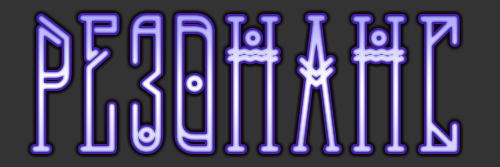
<style>
.page{position:relative;width:500px;height:167px;background:#333333}
.page>*{position:absolute;margin:0}
.t1{font:122.6px "AOTYPEcyr-lat";letter-spacing:0.03em;font-weight:bold}
</style>
<div class="page">
<p class="t1" style="left:32px;top:14px;width:426px;height:139px">резонанс</p>
</div>
